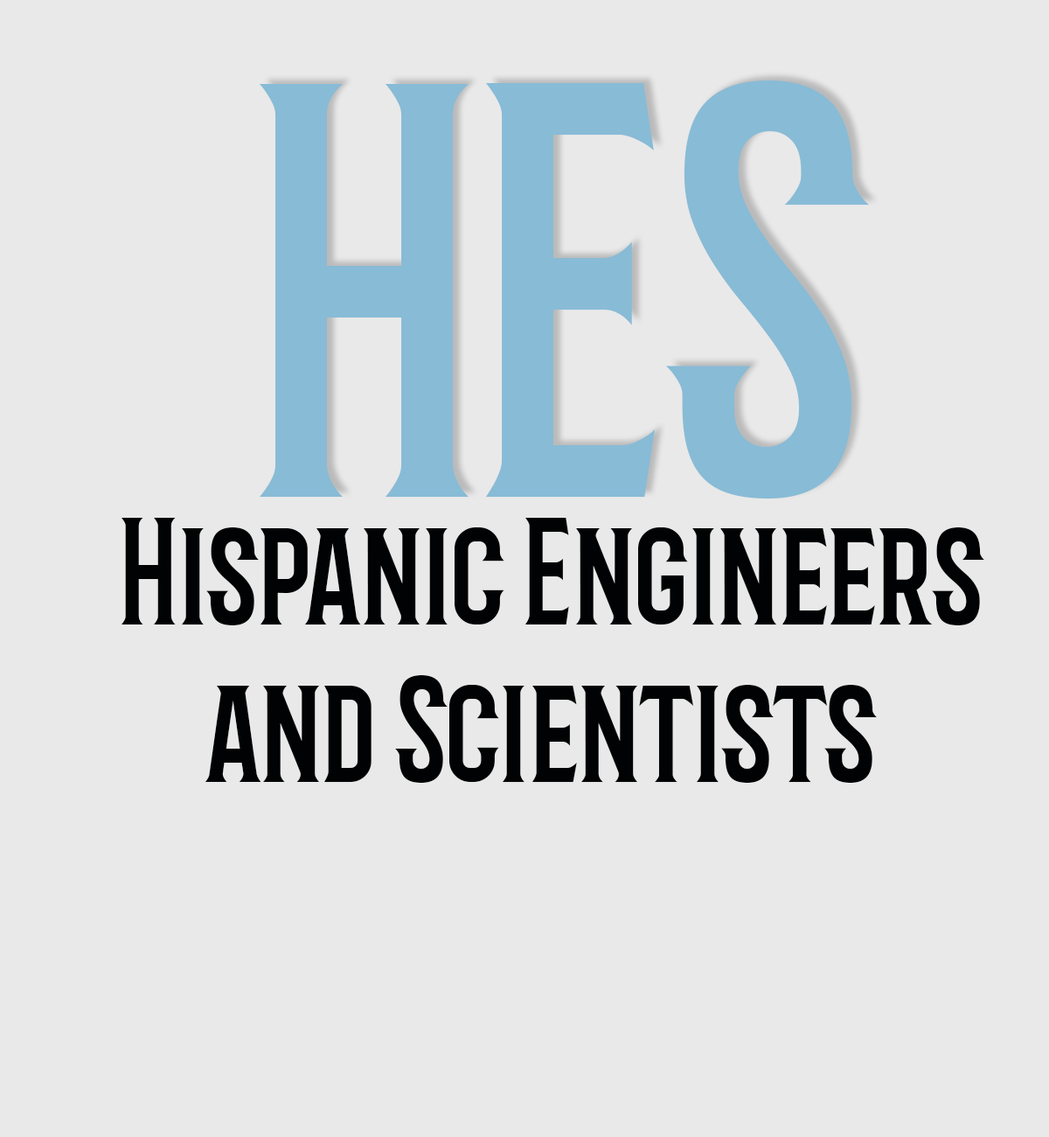
<style>
.page{position:relative;width:1049px;height:1137px;background:#e9e9e9}
.page>*{position:absolute;margin:0}
.t1{font:510px "Barbaro-Roman";color:#88bbd6}
.t2{font:131.1px "Barbaro-Roman";color:#000203}
</style>
<div class="page">
<p class="t1" style="left:260px;top:80px;width:609px;height:418px">HES</p>
<p class="t2" style="left:122px;top:518px;width:862px;height:264px">Hispanic Engineers<br>     and Scientists</p>
</div>
